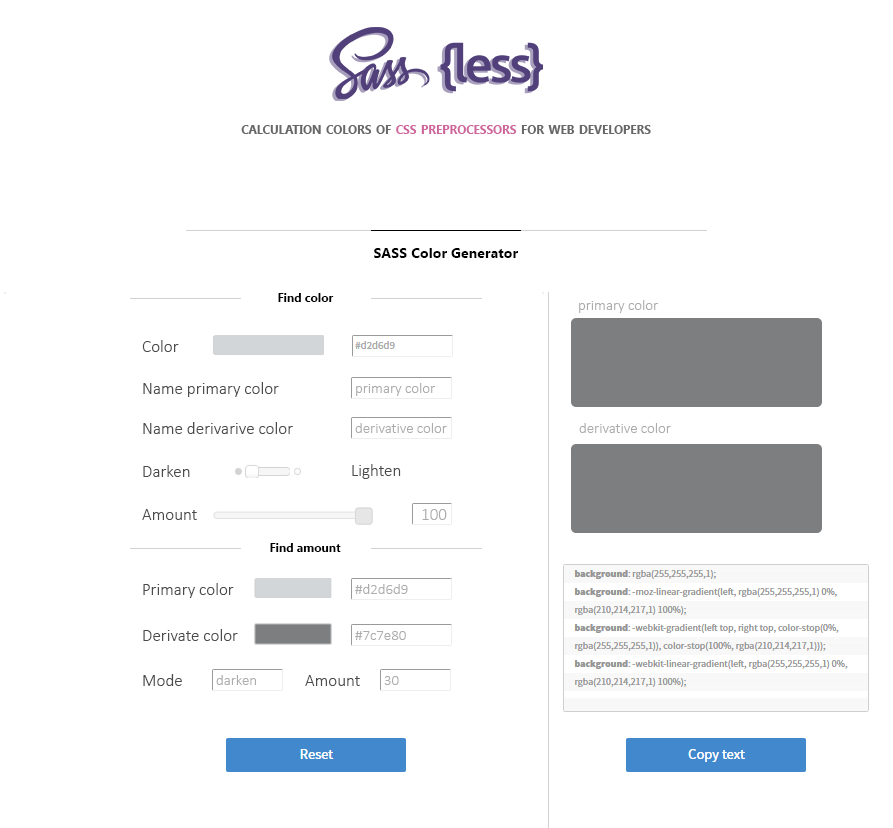
<style>
.page{position:relative;width:893px;height:828px;background:#ffffff}
.page>*{position:absolute;margin:0}
.t1{font:17px "Gadugi-Bold";letter-spacing:-0.004em;color:#676767;font-variant:small-caps}
.t2{font:17px "Gadugi-Bold";letter-spacing:-0.004em;color:#cd669a;font-variant:small-caps}
.t3{font:14.3px "Gadugi-Bold";letter-spacing:-0.004em;color:#000000}
.t4{font:12px "Gadugi-Bold";letter-spacing:-0.004em;color:#000000}
.t5{font:15px "Calibri-Light";letter-spacing:-0.004em;color:#acacac}
.t6{font:17.3px "Calibri-Light";letter-spacing:-0.004em;color:#4b4b4c}
.t7{font:17.3px "Calibri-Light";letter-spacing:-0.004em;color:#acacac}
</style>
<div class="page">
<p class="t1" style="left:241px;top:125px;width:410px;height:9px">calculation colors of <span class="t2">css preprocessors</span> for web developers</p>
<p class="t3" style="left:374px;top:248px;width:144px;height:10px">SASS Color Generator</p>
<p class="t4" style="left:278px;top:293px;width:56px;height:9px">Find color</p>
<p class="t5" style="left:579px;top:300px;width:79px;height:13px">primary color</p>
<p class="t6" style="left:142px;top:340px;width:37px;height:12px">Color</p>
<p class="t6" style="left:143px;top:382px;width:136px;height:15px">Name primary color</p>
<p class="t5" style="left:356px;top:383px;width:79px;height:13px">primary color</p>
<p class="t6" style="left:143px;top:422px;width:150px;height:12px">Name derivarive color</p>
<p class="t5" style="left:355px;top:423px;width:92px;height:10px">derivative color</p>
<p class="t5" style="left:579px;top:423px;width:92px;height:10px">derivative color</p>
<p class="t6" style="left:143px;top:465px;width:47px;height:12px">Darken</p>
<p class="t6" style="left:352px;top:464px;width:49px;height:15px">Lighten</p>
<p class="t6" style="left:142px;top:509px;width:55px;height:11px">Amount</p>
<p class="t7" style="left:422px;top:509px;width:25px;height:11px">100</p>
<p class="t4" style="left:270px;top:543px;width:71px;height:9px">Find amount</p>
<p class="t6" style="left:143px;top:583px;width:91px;height:15px">Primary color</p>
<p class="t5" style="left:355px;top:584px;width:53px;height:10px">#d2d6d9</p>
<p class="t6" style="left:143px;top:629px;width:95px;height:12px">Derivate color</p>
<p class="t5" style="left:355px;top:631px;width:51px;height:9px">#7c7e80</p>
<p class="t6" style="left:143px;top:674px;width:39px;height:12px">Mode</p>
<p class="t5" style="left:216px;top:675px;width:40px;height:10px">darken</p>
<p class="t6" style="left:305px;top:675px;width:55px;height:11px">Amount</p>
<p class="t5" style="left:384px;top:676px;width:15px;height:9px">30</p>
</div>
